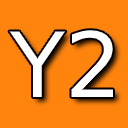
<style>
.page{position:relative;width:128px;height:128px;background:#ff840e}
.page>*{position:absolute;margin:0}
.t1{font:90px "DejaVuSans";color:#ffffff}
</style>
<div class="page">
<p class="t1" style="left:9px;top:30px;width:105px;height:67px">Y2</p>
</div>
